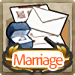
<style>
.page{position:relative;width:75px;height:75px}
.page>*{position:absolute;margin:0}
.t1{font:16px "AdobeClean-Regular";letter-spacing:-0.08em;color:#ff5a00}
</style>
<div class="page">
<p class="t1" style="left:13px;top:53px;width:50px;height:17px">Marriage</p>
</div>
